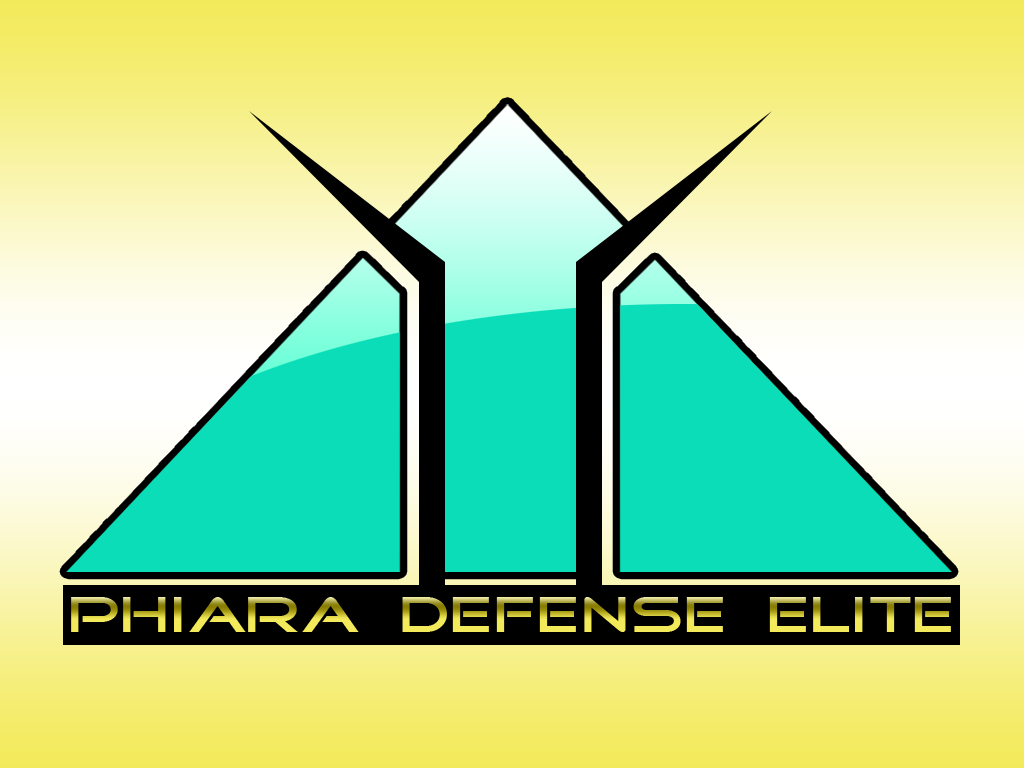
<style>
.page{position:relative;width:1024px;height:768px}
.page>*{position:absolute;margin:0}
.t1{font:50.8px "GoodTimes";scale:1.21 1}
</style>
<div class="page">
<p class="t1" style="left:71px;top:597px;width:880px;height:35px">Phiara  Defense  Elite</p>
</div>
